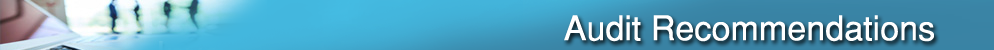
<style>
.page{position:relative;width:994px;height:50px}
.page>*{position:absolute;margin:0}
.t1{font:34px "Helvetica-Normal";color:#ffffff}
</style>
<div class="page">
<p class="t1" style="left:564px;top:15px;width:370px;height:27px">Audit Recommendations</p>
</div>
